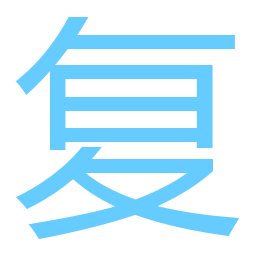
<style>
.page{position:relative;width:256px;height:256px;background:#ffffff}
.page>*{position:absolute;margin:0}
.t1{font:229.2px "MicrosoftYaHei";color:#66ccff}
</style>
<div class="page">
<p class="t1" style="left:15px;top:17px;width:225px;height:222px">复</p>
</div>
